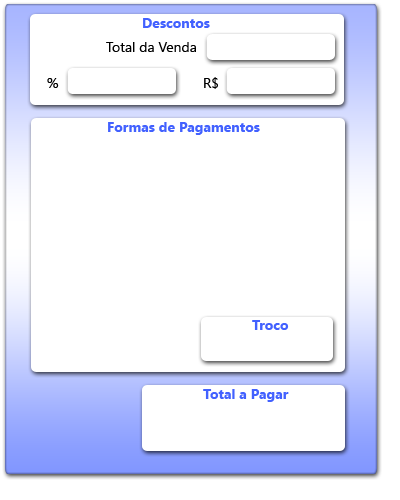
<style>
.page{position:relative;width:400px;height:500px;background:#ffffff}
.page>*{position:absolute;margin:0}
.t1{font:14px "SegoeUI-Bold";color:#4261ff}
.t2{font:14px "SegoeUI";color:#000000}
</style>
<div class="page">
<p class="t1" style="left:143px;top:18px;width:67px;height:10px">Descontos</p>
<p class="t2" style="left:106px;top:42px;width:90px;height:10px">Total da Venda</p>
<p class="t2" style="left:47px;top:78px;width:12px;height:10px">%</p>
<p class="t2" style="left:204px;top:77px;width:14px;height:12px">R$</p>
<p class="t1" style="left:108px;top:122px;width:152px;height:13px">Formas de Pagamentos</p>
<p class="t1" style="left:252px;top:320px;width:37px;height:10px">Troco</p>
<p class="t1" style="left:203px;top:389px;width:86px;height:13px">Total a Pagar</p>
</div>
